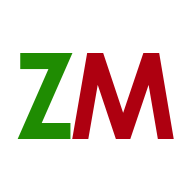
<style>
.page{position:relative;width:192px;height:192px;background:#ffffff}
.page>*{position:absolute;margin:0}
.t1{font:120px "CenturyGothic-Bold";letter-spacing:-0.05em;color:#1f8c02}
.t2{font:120px "CenturyGothic-Bold";letter-spacing:-0.05em;color:#ae0010}
</style>
<div class="page">
<p class="t1" style="left:17px;top:53px;width:157px;height:86px">Z<span class="t2">M</span></p>
</div>
